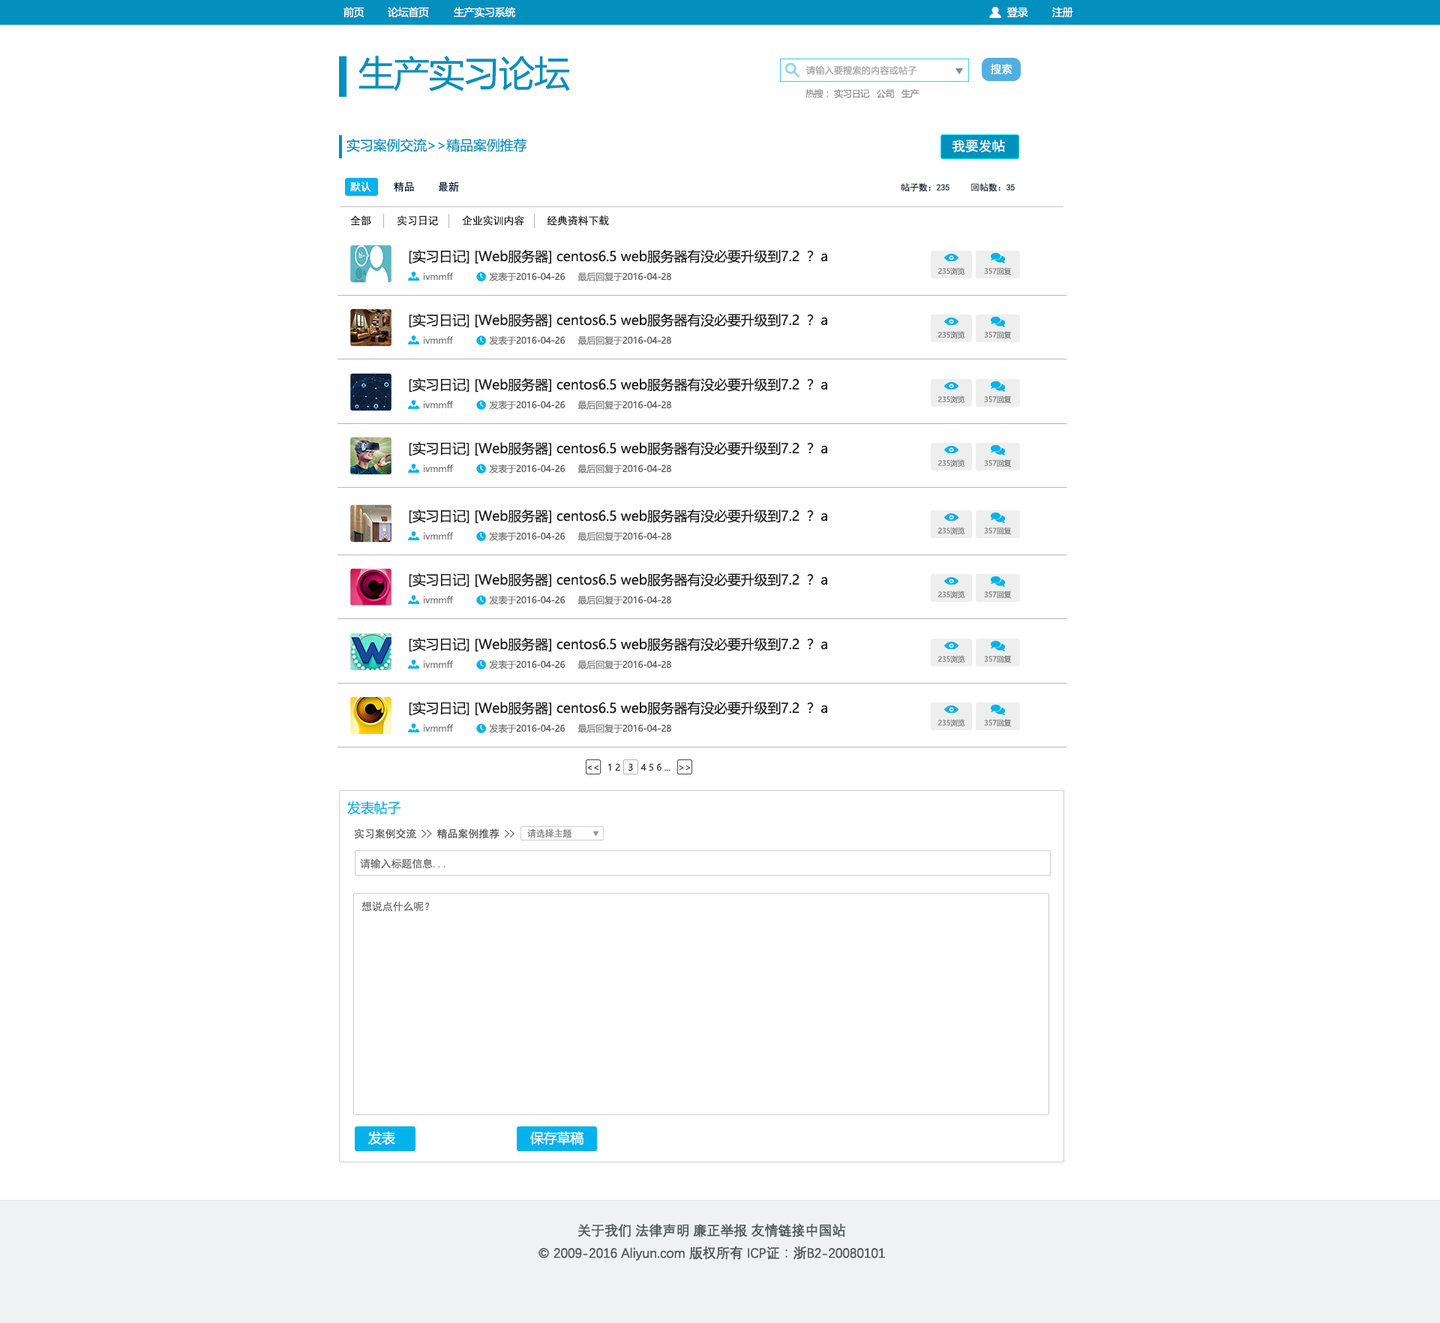
<style>
.page{position:relative;width:1440px;height:1323px;background:#ffffff}
.page>*{position:absolute;margin:0}
.t1{font:10.5px "MicrosoftYaHei";letter-spacing:-0.025em;color:#ffffff}
.t2{font:36px "MicrosoftYaHei";letter-spacing:-0.025em;color:#0390bf}
.t3{font:9px "MicrosoftYaHei";letter-spacing:0.025em;color:#a3a3a3}
.t4{font:10.5px "MicrosoftYaHei";letter-spacing:0.025em;color:#ffffff}
.t5{font:9px "MicrosoftYaHei";letter-spacing:-0.025em;color:#8a8a8a}
.t6{font:9px "MicrosoftYaHei";letter-spacing:-0.025em;color:#969696}
.t7{font:13.5px "MicrosoftYaHei";letter-spacing:-0.01em;color:#0390bf}
.t8{font:13.5px "SimHei";letter-spacing:-0.01em;color:#ffffff}
.t9{font:10.5px "SimHei";letter-spacing:-0.01em;color:#ffffff}
.t10{font:10.5px "SimHei";letter-spacing:-0.01em;color:#08182c}
.t11{font:9px "SimHei";letter-spacing:-0.01em;color:#08182c}
.t12{font:10.5px "SimHei";letter-spacing:-0.01em;color:#1a1a1a}
.t13{font:13.5px "MicrosoftYaHei";letter-spacing:-0.01em;color:#1a1a1a}
.t14{font:7.2px "MicrosoftYaHei";letter-spacing:-0.01em;color:#7a7a7a}
.t15{font:9px "MicrosoftYaHei";letter-spacing:-0.01em;color:#7a7a7a}
.t16{font:9px "MicrosoftYaHei";letter-spacing:-0.01em;color:#535353}
.t17{font:9px "MicrosoftYaHei";letter-spacing:-0.01em;color:#38393a}
.t18{font:9px "MicrosoftYaHei";letter-spacing:-0.01em;color:#252626}
.t19{font:13.5px "MicrosoftYaHei";letter-spacing:-0.01em;color:#04b3ed}
.t20{font:10.5px "SimHei";letter-spacing:-0.01em;color:#545556}
.t21{font:9px "SimHei";letter-spacing:-0.01em;color:#7a7a7b}
.t22{font:10.5px "SimHei";letter-spacing:-0.01em;color:#6b6b6d}
.t23{font:13.5px "MicrosoftYaHei";letter-spacing:-0.01em;color:#ffffff}
.t24{font:13.5px/22.5px "DengXian-Regular";letter-spacing:-0.025em;color:#545a5c;font-weight:bold}
</style>
<div class="page">
<p class="t1" style="left:344px;top:7px;width:21px;height:11px">前页</p>
<p class="t1" style="left:388px;top:7px;width:41px;height:11px">论坛首页</p>
<p class="t1" style="left:454px;top:7px;width:62px;height:11px">生产实习系统</p>
<p class="t1" style="left:1007px;top:7px;width:21px;height:10px">登录</p>
<p class="t1" style="left:1052px;top:7px;width:21px;height:11px">注册</p>
<p class="t2" style="left:359px;top:56px;width:211px;height:36px">生产实习论坛</p>
<p class="t3" style="left:806px;top:65px;width:111px;height:10px">请输入要搜索的内容或帖子</p>
<p class="t4" style="left:991px;top:64px;width:22px;height:10px">搜索</p>
<p class="t5" style="left:806px;top:89px;width:114px;height:9px"><span class="t6">热搜：</span> 实习日记   公司   生产</p>
<p class="t7" style="left:347px;top:138px;width:180px;height:14px">实习案例交流&gt;&gt;精品案例推荐</p>
<p class="t8" style="left:952px;top:140px;width:53px;height:12px">我要发帖</p>
<p class="t9" style="left:350px;top:182px;width:21px;height:10px">默认</p>
<p class="t10" style="left:394px;top:182px;width:20px;height:10px">精品</p>
<p class="t10" style="left:438px;top:182px;width:21px;height:10px">最新</p>
<p class="t11" style="left:901px;top:183px;width:49px;height:9px">帖子数：235</p>
<p class="t11" style="left:971px;top:183px;width:44px;height:9px">回帖数：35</p>
<p class="t12" style="left:350px;top:215px;width:21px;height:11px">全部</p>
<p class="t12" style="left:397px;top:215px;width:42px;height:11px">实习日记</p>
<p class="t12" style="left:462px;top:215px;width:62px;height:11px">企业实训内容</p>
<p class="t12" style="left:547px;top:215px;width:62px;height:11px">经典资料下载</p>
<p class="t13" style="left:409px;top:249px;width:418px;height:15px">[实习日记] [Web服务器] centos6.5 web服务器有没必要升级到7.2 ？ a</p>
<p class="t14" style="left:938px;top:267px;width:27px;height:8px">235浏览</p>
<p class="t14" style="left:984px;top:267px;width:28px;height:8px">357回复</p>
<p class="t15" style="left:423px;top:272px;width:30px;height:8px">ivmmff</p>
<p class="t16" style="left:489px;top:272px;width:77px;height:9px"><span class="t15"> 发表于</span>2016-04-26</p>
<p class="t16" style="left:578px;top:272px;width:93px;height:9px"><span class="t15"> 最后回复于</span>2016-04-28</p>
<p class="t13" style="left:409px;top:313px;width:418px;height:15px">[实习日记] [Web服务器] centos6.5 web服务器有没必要升级到7.2 ？ a</p>
<p class="t15" style="left:423px;top:336px;width:30px;height:8px">ivmmff</p>
<p class="t16" style="left:489px;top:335px;width:77px;height:10px"><span class="t15"> 发表于</span>2016-04-26</p>
<p class="t16" style="left:578px;top:335px;width:93px;height:10px"><span class="t15"> 最后回复于</span>2016-04-28</p>
<p class="t14" style="left:938px;top:331px;width:27px;height:7px">235浏览</p>
<p class="t14" style="left:984px;top:331px;width:28px;height:8px">357回复</p>
<p class="t13" style="left:409px;top:377px;width:418px;height:15px">[实习日记] [Web服务器] centos6.5 web服务器有没必要升级到7.2 ？ a</p>
<p class="t15" style="left:423px;top:401px;width:30px;height:7px">ivmmff</p>
<p class="t16" style="left:489px;top:400px;width:77px;height:10px"><span class="t15"> 发表于</span>2016-04-26</p>
<p class="t16" style="left:578px;top:400px;width:93px;height:10px"><span class="t15"> 最后回复于</span>2016-04-28</p>
<p class="t14" style="left:938px;top:395px;width:27px;height:8px">235浏览</p>
<p class="t14" style="left:984px;top:395px;width:28px;height:9px">357回复</p>
<p class="t13" style="left:409px;top:441px;width:418px;height:15px">[实习日记] [Web服务器] centos6.5 web服务器有没必要升级到7.2 ？ a</p>
<p class="t14" style="left:938px;top:459px;width:27px;height:8px">235浏览</p>
<p class="t14" style="left:984px;top:459px;width:28px;height:8px">357回复</p>
<p class="t15" style="left:423px;top:464px;width:30px;height:8px">ivmmff</p>
<p class="t16" style="left:489px;top:464px;width:77px;height:9px"><span class="t15"> 发表于</span>2016-04-26</p>
<p class="t16" style="left:578px;top:464px;width:93px;height:9px"><span class="t15"> 最后回复于</span>2016-04-28</p>
<p class="t13" style="left:409px;top:509px;width:418px;height:15px">[实习日记] [Web服务器] centos6.5 web服务器有没必要升级到7.2 ？ a</p>
<p class="t15" style="left:423px;top:532px;width:30px;height:7px">ivmmff</p>
<p class="t16" style="left:489px;top:531px;width:77px;height:10px"><span class="t15"> 发表于</span>2016-04-26</p>
<p class="t16" style="left:578px;top:531px;width:93px;height:10px"><span class="t15"> 最后回复于</span>2016-04-28</p>
<p class="t14" style="left:938px;top:527px;width:27px;height:8px">235浏览</p>
<p class="t14" style="left:984px;top:527px;width:28px;height:8px">357回复</p>
<p class="t13" style="left:409px;top:572px;width:418px;height:15px">[实习日记] [Web服务器] centos6.5 web服务器有没必要升级到7.2 ？ a</p>
<p class="t14" style="left:938px;top:590px;width:27px;height:8px">235浏览</p>
<p class="t14" style="left:984px;top:590px;width:28px;height:9px">357回复</p>
<p class="t15" style="left:423px;top:596px;width:30px;height:7px">ivmmff</p>
<p class="t16" style="left:489px;top:595px;width:77px;height:10px"><span class="t15"> 发表于</span>2016-04-26</p>
<p class="t16" style="left:578px;top:595px;width:93px;height:10px"><span class="t15"> 最后回复于</span>2016-04-28</p>
<p class="t13" style="left:409px;top:637px;width:418px;height:15px">[实习日记] [Web服务器] centos6.5 web服务器有没必要升级到7.2 ？ a</p>
<p class="t15" style="left:423px;top:660px;width:30px;height:8px">ivmmff</p>
<p class="t16" style="left:489px;top:659px;width:77px;height:10px"><span class="t15"> 发表于</span>2016-04-26</p>
<p class="t16" style="left:578px;top:659px;width:93px;height:10px"><span class="t15"> 最后回复于</span>2016-04-28</p>
<p class="t14" style="left:938px;top:655px;width:27px;height:7px">235浏览</p>
<p class="t14" style="left:984px;top:655px;width:28px;height:8px">357回复</p>
<p class="t13" style="left:409px;top:701px;width:418px;height:15px">[实习日记] [Web服务器] centos6.5 web服务器有没必要升级到7.2 ？ a</p>
<p class="t15" style="left:423px;top:724px;width:30px;height:7px">ivmmff</p>
<p class="t16" style="left:489px;top:723px;width:77px;height:10px"><span class="t15"> 发表于</span>2016-04-26</p>
<p class="t16" style="left:578px;top:723px;width:93px;height:10px"><span class="t15"> 最后回复于</span>2016-04-28</p>
<p class="t14" style="left:938px;top:719px;width:27px;height:7px">235浏览</p>
<p class="t14" style="left:984px;top:719px;width:28px;height:8px">357回复</p>
<p class="t17" style="left:587px;top:763px;width:104px;height:8px">&lt;&lt;   1 2 <span class="t18">  3 </span>  4 5 6 ...   &gt;&gt;</p>
<p class="t19" style="left:347px;top:800px;width:54px;height:15px">发表帖子</p>
<p class="t20" style="left:354px;top:828px;width:161px;height:11px">实习案例交流 &gt;&gt; 精品案例推荐 &gt;&gt;</p>
<p class="t21" style="left:527px;top:829px;width:45px;height:9px">请选择主题</p>
<p class="t22" style="left:360px;top:858px;width:86px;height:11px">请输入标题信息...</p>
<p class="t22" style="left:362px;top:901px;width:67px;height:10px">想说点什么呢？</p>
<p class="t23" style="left:368px;top:1130px;width:27px;height:15px">发表</p>
<p class="t23" style="left:530px;top:1130px;width:54px;height:15px">保存草稿</p>
<p class="t24" style="left:539px;top:1223px;width:346px;height:37px;text-align:center">关于我们 法律声明 廉正举报 友情链接中国站<br>© 2009-2016 Aliyun.com 版权所有 ICP证：浙B2-20080101</p>
</div>
